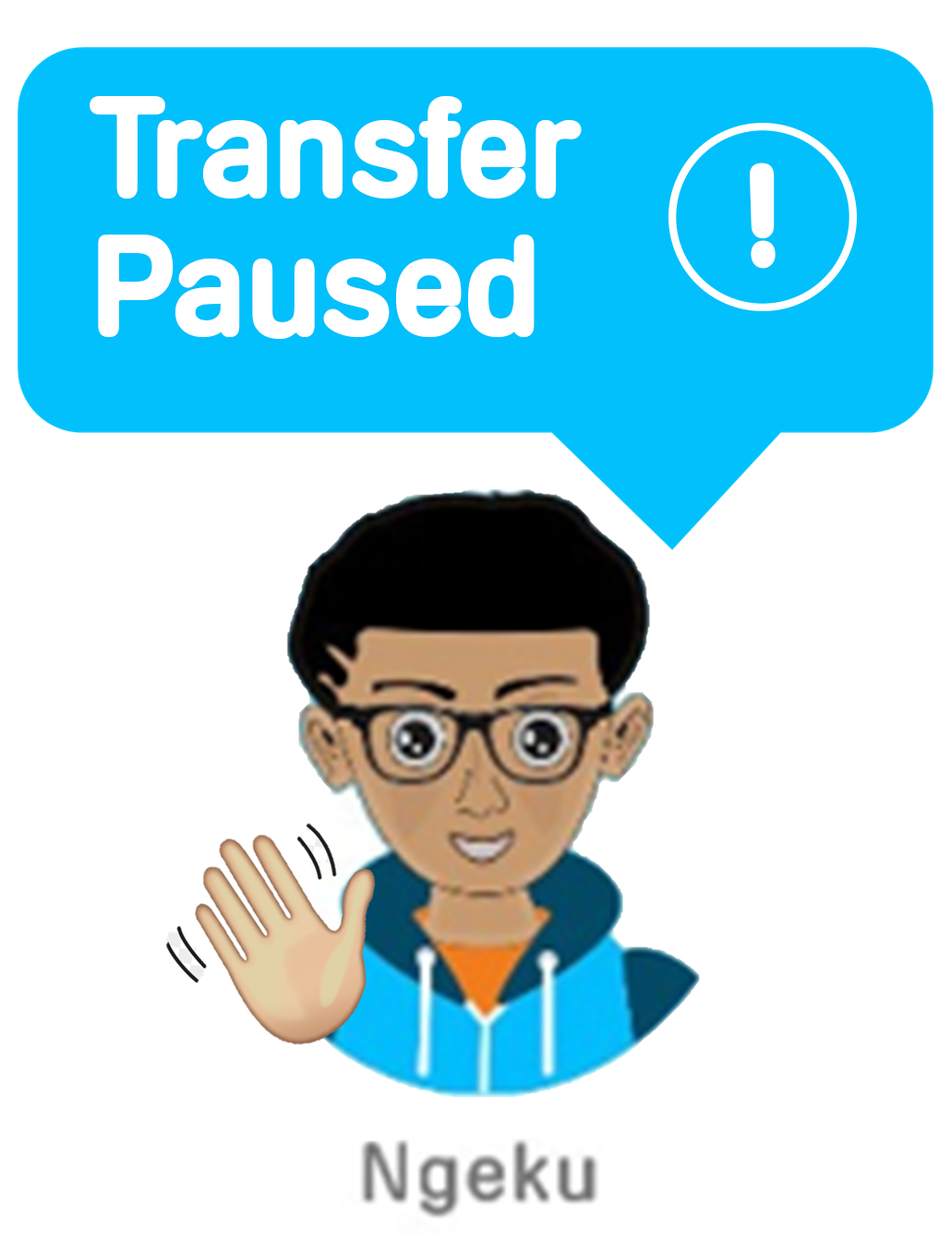
<style>
.page{position:relative;width:951px;height:1254px;background:#ffffff}
.page>*{position:absolute;margin:0}
.t1{font:136.2px/138.5px "AndreasBecker";color:#ffffff;font-weight:bold}
.t2{font:138.5px "AndreasBecker-Bold";color:#ffffff;font-weight:bold}
</style>
<div class="page">
<p class="t1" style="left:90px;top:96px;width:492px;height:243px">Transfer <br>Paused</p>
<p class="t2" style="left:750px;top:163px;width:26px;height:106px">!</p>
</div>
